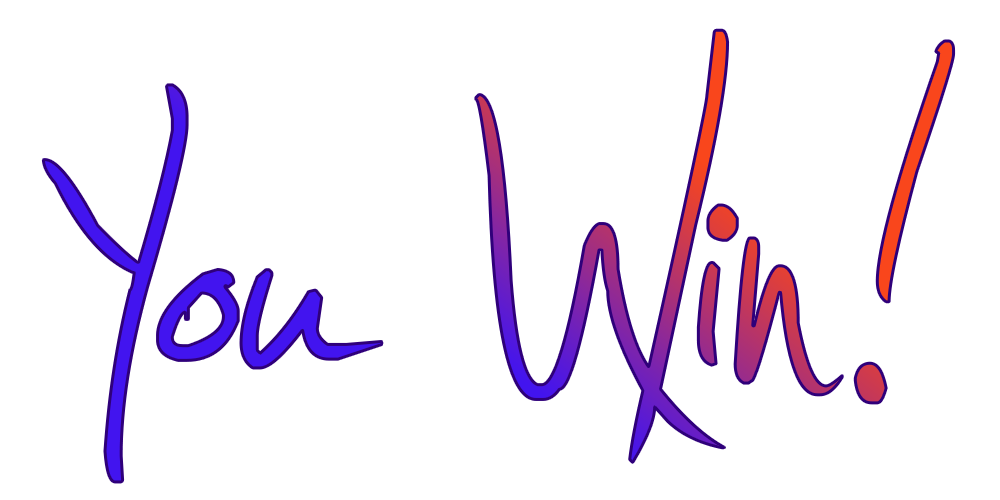
<style>
.page{position:relative;width:1000px;height:500px;background:#ffffff}
.page>*{position:absolute;margin:0}
.t1{font:750px "Jellyka---Estrya's-Handwriting"}
</style>
<div class="page">
<p class="t1" style="left:43px;top:30px;width:911px;height:452px">You Win!</p>
</div>
